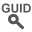
<style>
.page{position:relative;width:32px;height:32px;background:#ffffff}
.page>*{position:absolute;margin:0}
.t1{font:12px "Arial-BoldMT";color:#555555}
</style>
<div class="page">
<p class="t1" style="left:1px;top:3px;width:30px;height:10px">GUID</p>
</div>
